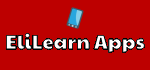
<style>
.page{position:relative;width:150px;height:70px;background:#bd0000}
.page>*{position:absolute;margin:0}
.t1{font:20px "PaytoneOne-Regular"}
</style>
<div class="page">
<p class="t1" style="left:5px;top:32px;width:141px;height:22px">EliLearn Apps</p>
</div>
